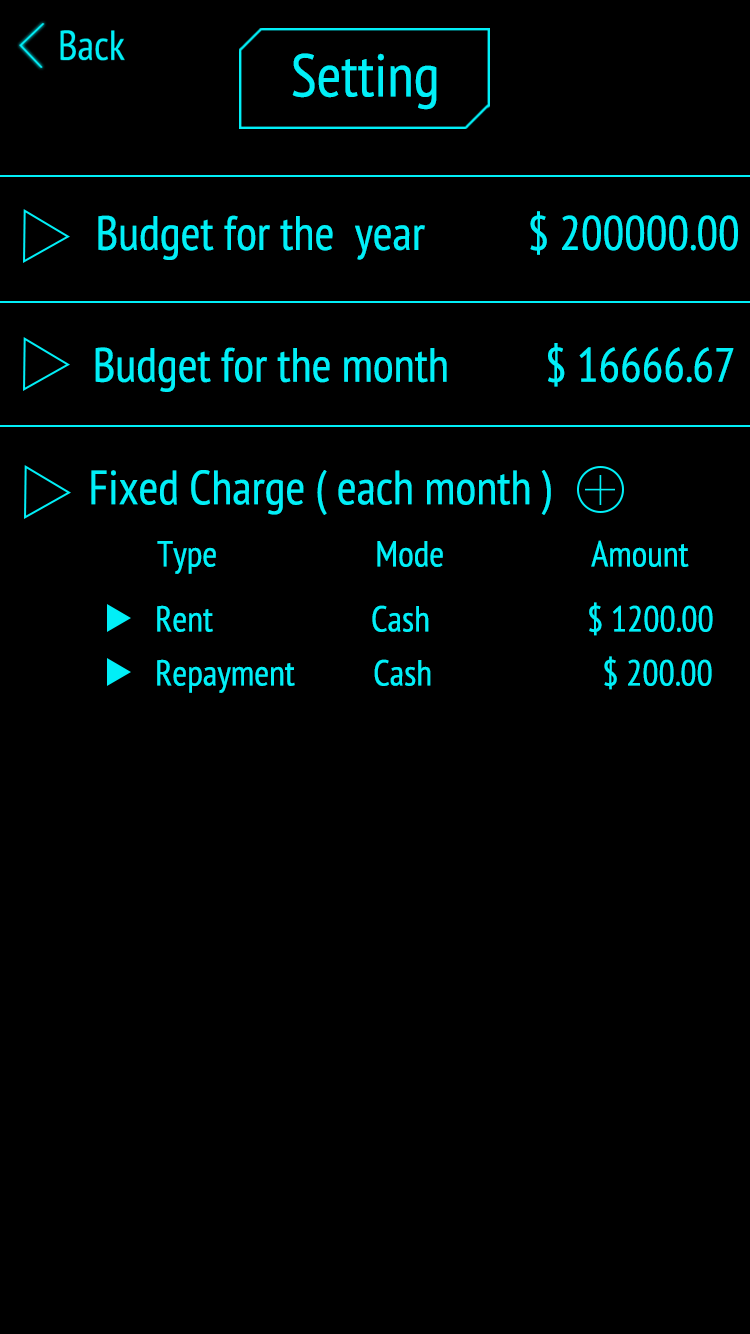
<style>
.page{position:relative;width:750px;height:1334px;background:#000000}
.page>*{position:absolute;margin:0}
.t1{font:60px "PTSans-Narrow";color:#01eff7}
.t2{font:48px "PTSans-Narrow";color:#01eff7}
.t3{font:36px "PTSans-Narrow";color:#01eff7}
</style>
<div class="page">
<p class="t1" style="left:292px;top:53px;width:145px;height:57px">Setting</p>
<p class="t2" style="left:98px;top:211px;width:640px;height:49px">Budget for the  year   $ 200000.00</p>
<p class="t2" style="left:95px;top:343px;width:639px;height:49px">Budget for the month     $ 16666.67</p>
<p class="t2" style="left:91px;top:470px;width:460px;height:45px">Fixed Charge ( each month )</p>
<p class="t3" style="left:157px;top:540px;width:532px;height:34px">Type         Mode         Amount</p>
<p class="t3" style="left:157px;top:602px;width:556px;height:34px">Rent     Cash      $ 1200.00</p>
<p class="t3" style="left:157px;top:656px;width:555px;height:37px">Repayment       Cash        $ 200.00</p>
</div>
